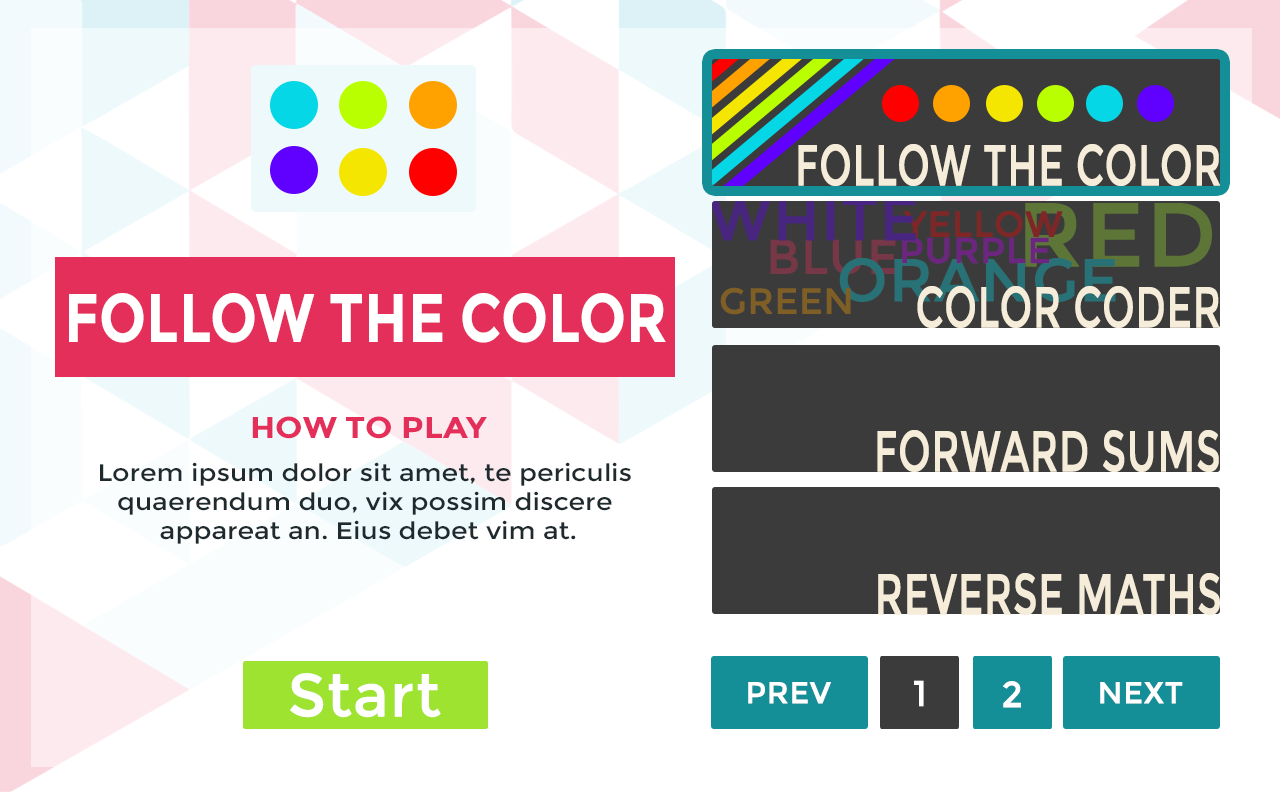
<style>
.page{position:relative;width:1280px;height:800px;background:#ffffff}
.page>*{position:absolute;margin:0}
.t1{font:57.6px "Montserrat-Regular";color:#f5ecd9;font-weight:bold;scale:0.67 1}
.t2{font:36px "Montserrat-Regular";color:#6c267f;font-weight:bold}
.t3{font:68.4px "Montserrat-Bold";color:#ffffff;scale:0.83 1}
.t4{font:24px "Montserrat-Regular";color:#1e2a2e;scale:1.11 1}
.t5{font:30px "Montserrat-Bold";color:#e32f5a;scale:1.11 1}
.t6{font:60px "Montserrat-Regular";color:#ffffff;font-weight:bold}
.t7{font:30px "Montserrat-Regular";color:#ffffff;font-weight:bold}
.t8{font:36px "Montserrat-Regular";color:#ffffff;font-weight:bold}
</style>
<div class="page">
<p class="t1" style="left:798px;top:144px;width:422px;height:42px">FOLLOW THE COLOR</p>
<p class="t2" style="left:902px;top:237px;width:148px;height:27px">PURPLE</p>
<p class="t3" style="left:69px;top:293px;width:597px;height:50px">FOLLOW THE COLOR</p>
<p class="t1" style="left:917px;top:286px;width:303px;height:42px">COLOR CODER</p>
<p class="t4" style="left:100px;top:416px;width:531px;height:128px;text-align:center"><span class="t5">HOW TO PLAY<br><br></span>Lorem ipsum dolor sit amet, te periculis <br>quaerendum duo, vix possim discere <br>appareat an. Eius debet vim at.</p>
<p class="t1" style="left:877px;top:430px;width:342px;height:42px">FORWARD SUMS</p>
<p class="t1" style="left:878px;top:573px;width:342px;height:42px">REVERSE MATHS</p>
<p class="t6" style="left:290px;top:673px;width:151px;height:45px">Start</p>
<p class="t7" style="left:748px;top:682px;width:83px;height:22px">PREV</p>
<p class="t8" style="left:914px;top:680px;width:10px;height:27px">1</p>
<p class="t8" style="left:1003px;top:681px;width:18px;height:27px">2</p>
<p class="t7" style="left:1100px;top:682px;width:83px;height:22px">NEXT</p>
</div>
